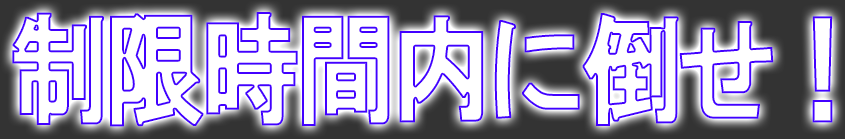
<style>
.page{position:relative;width:845px;height:139px;background:#ffffff}
.page>*{position:absolute;margin:0}
.t1{font:121.2px "HGSGothicE";letter-spacing:-0.07em;color:#ffffff;font-weight:bold;scale:0.82 1}
</style>
<div class="page">
<p class="t1" style="left:12px;top:12px;width:821px;height:115px">制限時間内に倒せ！</p>
</div>
